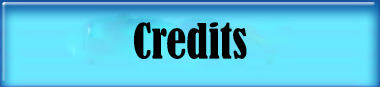
<style>
.page{position:relative;width:380px;height:87px}
.page>*{position:absolute;margin:0}
.t1{font:45px "BernardMT-Condensed";color:#000000}
</style>
<div class="page">
<p class="t1" style="left:134px;top:22px;width:113px;height:37px">Credits</p>
</div>
